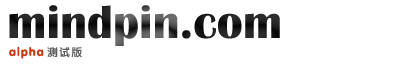
<style>
.page{position:relative;width:420px;height:75px;background:#ffffff}
.page>*{position:absolute;margin:0}
.t1{font:48px "BritannicBold"}
.t2{font:12px "FZY4JW--GB1-0";letter-spacing:0.1em;color:#c83914}
</style>
<div class="page">
<p class="t1" style="left:9px;top:5px;width:271px;height:41px">mindpin.com</p>
<p class="t2" style="left:9px;top:46px;width:35px;height:13px">alpha</p>
</div>
